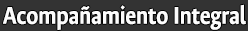
<style>
.page{position:relative;width:248px;height:31px;background:#333333}
.page>*{position:absolute;margin:0}
.t1{font:27.1px "AncizarSans-Bold";color:#fcfcfc;scale:0.86 1}
</style>
<div class="page">
<p class="t1" style="left:3px;top:4px;width:243px;height:26px">Acompañamiento Integral</p>
</div>
